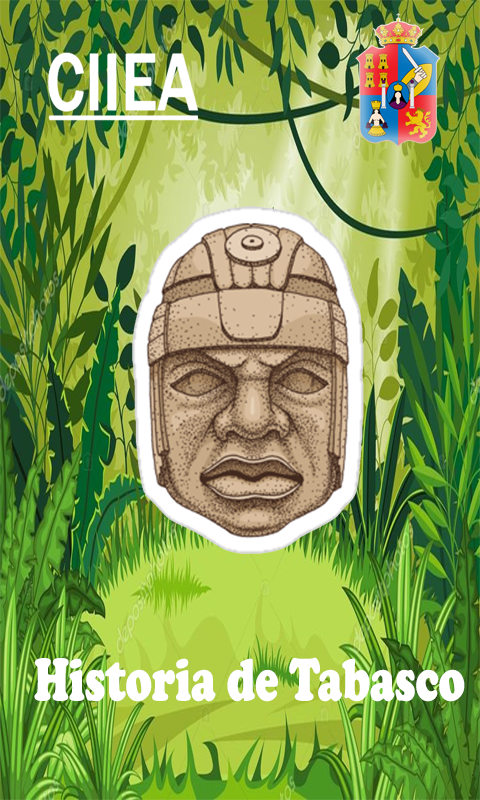
<style>
.page{position:relative;width:480px;height:800px}
.page>*{position:absolute;margin:0}
.t1{font:62.2px "CooperBlack";color:#ffffff;scale:0.7 1}
</style>
<div class="page">
<p class="t1" style="left:34px;top:657px;width:431px;height:45px">Historia de Tabasco</p>
</div>
